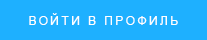
<style>
.page{position:relative;width:207px;height:40px;background:#1eb0ff}
.page>*{position:absolute;margin:0}
.t1{font:12px "ArialMT";letter-spacing:0.2em;color:#ffffff;text-transform:uppercase}
</style>
<div class="page">
<p class="t1" style="left:29px;top:13px;width:149px;height:12px">ВОЙТИ В ПРОФИЛЬ</p>
</div>
